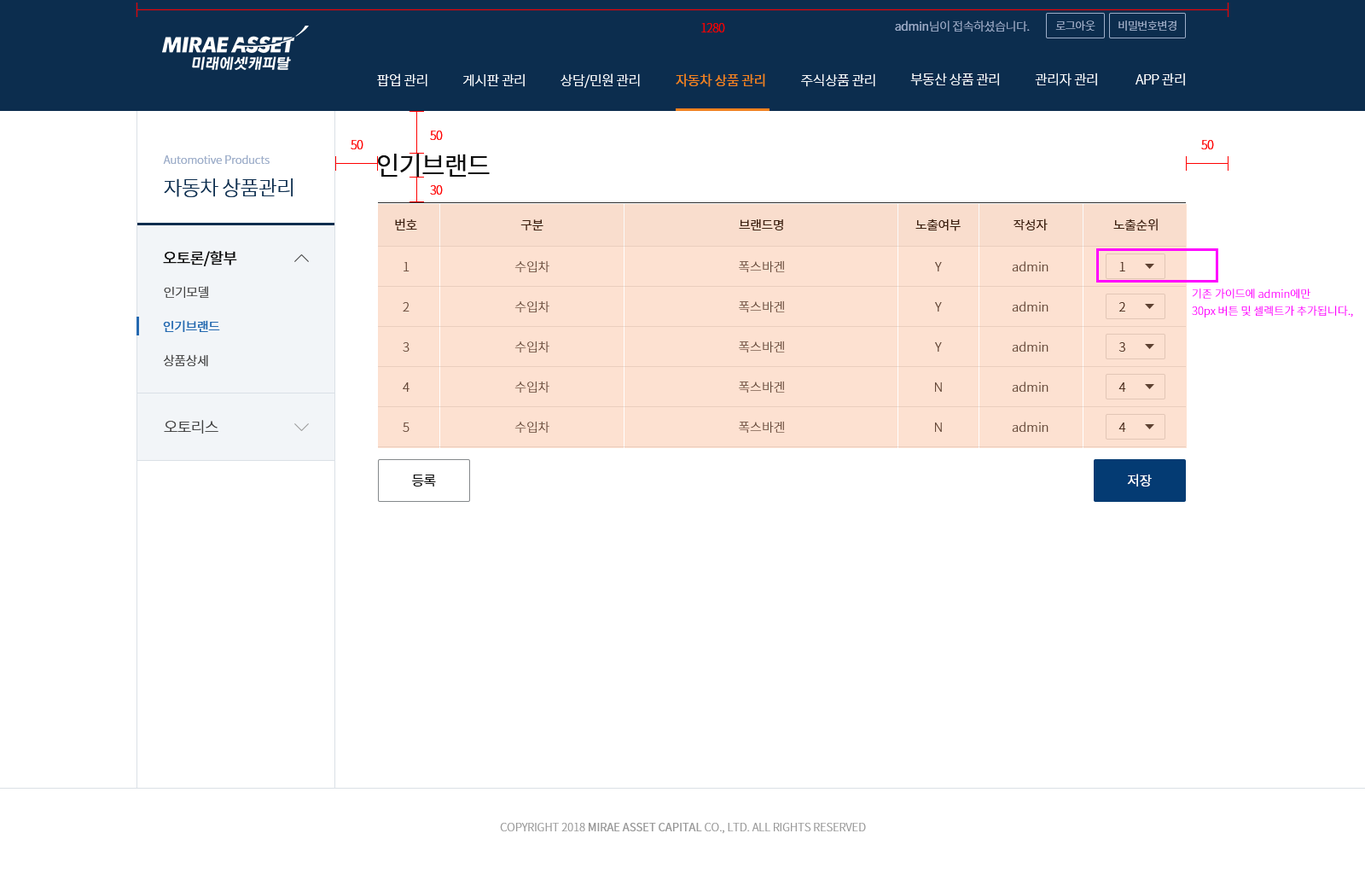
<style>
.page{position:relative;width:1365px;height:874px;background:#ffffff}
.page>*{position:absolute;margin:0}
.t1{font:11.9px "NotoSansCJKkr-Light";letter-spacing:-0.03em;color:#ff0000}
.t2{font:11.9px "NotoSansCJKkr-Light";letter-spacing:-0.03em;color:#99aac7}
.t3{font:11.9px "NotoSansCJKkr-Regular";letter-spacing:-0.03em;color:#99aac7}
.t4{font:11.1px "NotoSansCJKkr-Light";letter-spacing:-0.03em;color:#9fafca}
.t5{font:13.6px "NotoSansCJKkr-Light";letter-spacing:-0.03em;color:#ffffff}
.t6{font:13.6px "NotoSansCJKkr-Regular";letter-spacing:-0.03em;color:#f58220}
.t7{font:11.1px "NotoSansCJKkr-Light";color:#99aac7}
.t8{font:25.6px "NotoSansCJKkr-Regular";letter-spacing:-0.03em;color:#0f0f0f}
.t9{font:20.5px "NotoSansCJKkr-Light";letter-spacing:-0.03em;color:#0c2d4e}
.t10{font:12.8px "NotoSansCJKkr-Regular";letter-spacing:-0.03em;color:#3d2111}
.t11{font:15.4px "NotoSansCJKkr-Regular";letter-spacing:-0.03em;color:#0f0f0f}
.t12{font:12.8px/40.1px "NotoSansCJKkr-Light";color:#654838}
.t13{font:12.8px "NotoSansCJKkr-Light";color:#3d2111}
.t14{font:12.8px "NotoSansCJKkr-Light";letter-spacing:-0.03em;color:#404040}
.t15{font:11.1px/17.1px "NotoSansCJKkr-Light";color:#ff00ff}
.t16{font:12.8px/34.1px "NotoSansCJKkr-Regular";letter-spacing:-0.03em;color:#2469b0}
.t17{font:12.8px/34.1px "NotoSansCJKkr-Light";letter-spacing:-0.03em;color:#ffffff}
.t18{font:12.8px/34.1px "NotoSansCJKkr-Light";letter-spacing:-0.03em;color:#404040}
.t19{font:15.4px "NotoSansCJKkr-Light";letter-spacing:-0.03em;color:#404040}
.t20{font:13.6px "NotoSansCJKkr-Regular";letter-spacing:-0.03em;color:#ffffff}
.t21{font:13.6px "NotoSansCJKkr-Regular";letter-spacing:-0.03em;color:#0f0f0f}
.t22{font:11.1px "NotoSansCJKkr-Light";color:#999999}
.t23{font:11.1px "NotoSansCJKkr-Regular";color:#999999}
</style>
<div class="page">
<p class="t1" style="left:701px;top:23px;width:24px;height:9px">1280</p>
<p class="t2" style="left:895px;top:20px;width:135px;height:12px"><span class="t3">admin</span>님이 접속하셨습니다.</p>
<p class="t4" style="left:1055px;top:20px;width:40px;height:11px">로그아웃</p>
<p class="t4" style="left:1118px;top:20px;width:58px;height:11px">비밀번호변경</p>
<p class="t5" style="left:377px;top:73px;width:50px;height:14px">팝업 관리</p>
<p class="t5" style="left:463px;top:73px;width:62px;height:14px">게시판 관리</p>
<p class="t5" style="left:560px;top:73px;width:80px;height:15px">상담/민원 관리</p>
<p class="t6" style="left:676px;top:73px;width:89px;height:14px">자동차 상품 관리</p>
<p class="t5" style="left:801px;top:73px;width:74px;height:14px">주식상품 관리</p>
<p class="t5" style="left:910px;top:73px;width:89px;height:13px">부동산 상품 관리</p>
<p class="t5" style="left:1035px;top:73px;width:62px;height:13px">관리자 관리</p>
<p class="t5" style="left:1135px;top:73px;width:50px;height:13px">APP 관리</p>
<p class="t1" style="left:430px;top:131px;width:13px;height:9px">50</p>
<p class="t1" style="left:351px;top:140px;width:12px;height:9px">50</p>
<p class="t1" style="left:1201px;top:140px;width:13px;height:9px">50</p>
<p class="t7" style="left:163px;top:154px;width:107px;height:10px">Automotive Products</p>
<p class="t8" style="left:378px;top:154px;width:112px;height:23px">인기브랜드</p>
<p class="t9" style="left:164px;top:178px;width:129px;height:19px">자동차 상품관리</p>
<p class="t1" style="left:430px;top:185px;width:13px;height:10px">30</p>
<p class="t10" style="left:395px;top:218px;width:22px;height:12px">번호</p>
<p class="t10" style="left:520px;top:219px;width:23px;height:11px">구분</p>
<p class="t10" style="left:739px;top:218px;width:44px;height:12px">브랜드명</p>
<p class="t10" style="left:915px;top:218px;width:46px;height:13px">노출여부</p>
<p class="t10" style="left:1013px;top:218px;width:35px;height:12px">작성자</p>
<p class="t10" style="left:1113px;top:218px;width:45px;height:13px">노출순위</p>
<p class="t11" style="left:163px;top:251px;width:74px;height:15px">오토론/할부</p>
<p class="t12" style="left:403px;top:262px;width:6px;height:170px;text-align:center">1<br>2<br>3<br>4<br>5</p>
<p class="t12" style="left:514px;top:260px;width:35px;height:173px;text-align:center">수입차<br>수입차<br>수입차<br>수입차<br>수입차</p>
<p class="t12" style="left:739px;top:260px;width:46px;height:173px;text-align:center">폭스바겐<br>폭스바겐<br>폭스바겐<br>폭스바겐<br>폭스바겐</p>
<p class="t12" style="left:935px;top:262px;width:7px;height:170px;text-align:center">Y<br>Y<br>Y<br>N<br>N</p>
<p class="t12" style="left:1012px;top:261px;width:36px;height:171px;text-align:center">admin<br>admin<br>admin<br>admin<br>admin</p>
<p class="t13" style="left:1119px;top:262px;width:6px;height:9px">1</p>
<p class="t14" style="left:164px;top:286px;width:45px;height:12px">인기모델</p>
<p class="t15" style="left:1192px;top:288px;width:161px;height:29px">기존 가이드에 admin에만 <br>30px 버튼 및 셀렉트가 추가됩니다.,</p>
<p class="t13" style="left:1119px;top:302px;width:6px;height:9px">2</p>
<p class="t16" style="left:163px;top:320px;width:57px;height:47px"><span class="t17"><br></span>인기브랜드<br><span class="t18">상품상세</span></p>
<p class="t13" style="left:1118px;top:342px;width:7px;height:9px">3</p>
<p class="t13" style="left:1118px;top:382px;width:8px;height:10px">4</p>
<p class="t19" style="left:164px;top:420px;width:54px;height:13px">오토리스</p>
<p class="t13" style="left:1118px;top:422px;width:8px;height:10px">4</p>
<p class="t20" style="left:1127px;top:473px;width:25px;height:13px">저장</p>
<p class="t21" style="left:412px;top:474px;width:24px;height:12px">등록</p>
<p class="t22" style="left:500px;top:822px;width:366px;height:11px">COPYRIGHT 2018 <span class="t23">MIRAE ASSET CAPITAL</span> CO., LTD. ALL RIGHTS RESERVED</p>
</div>
